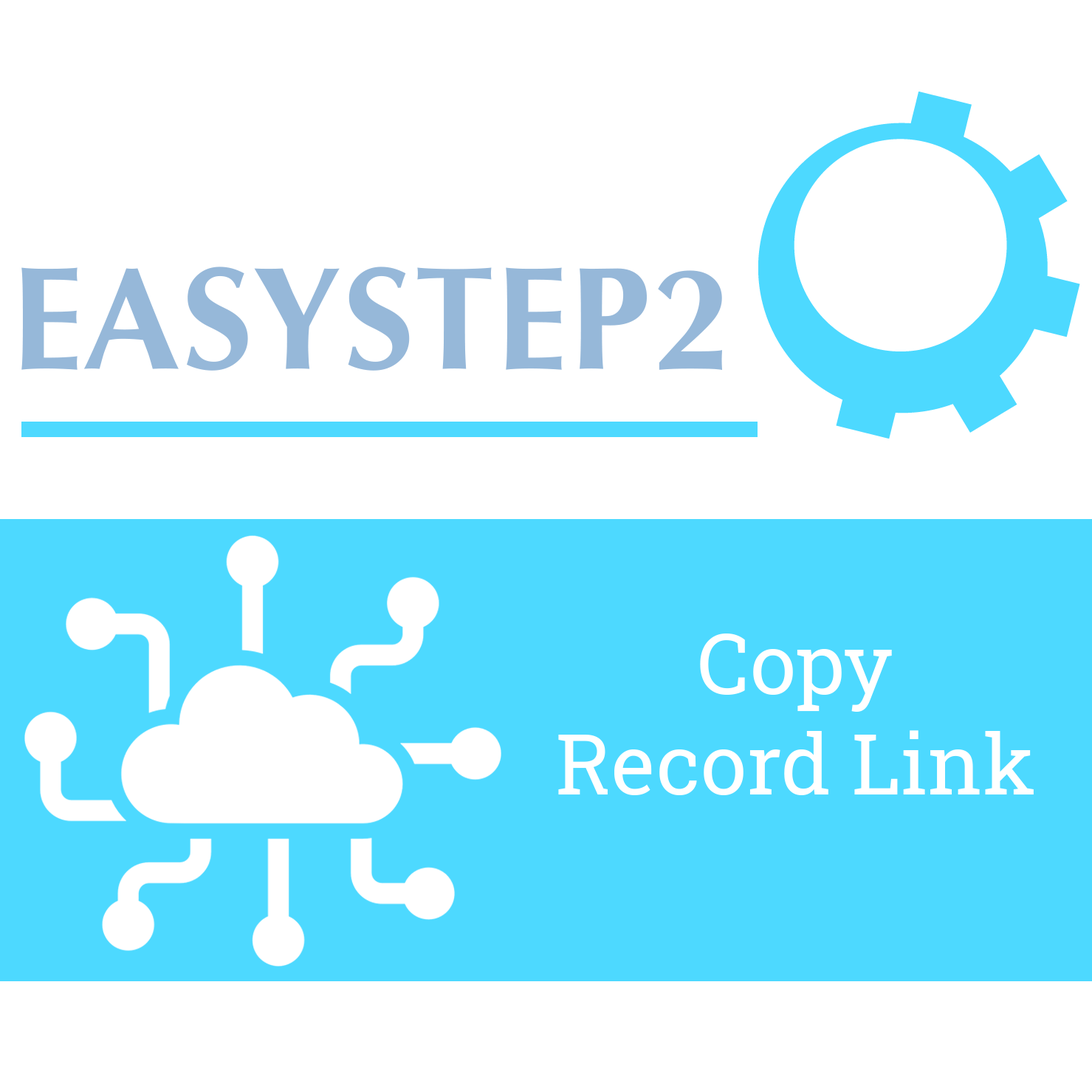
<style>
.page{position:relative;width:1092px;height:1092px;background:#ffffff}
.page>*{position:absolute;margin:0}
.t1{font:83.6px "RobotoSlab-Bold";color:#ffffff}
</style>
<div class="page">
<p class="t1" style="left:558px;top:633px;width:476px;height:162px;text-align:center">Copy <br>Record Link</p>
</div>
